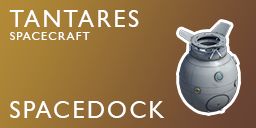
<style>
.page{position:relative;width:256px;height:128px}
.page>*{position:absolute;margin:0}
.t1{font:24px "GillSansMT";letter-spacing:0.1em;color:#ffffff}
.t2{font:12px "GillSansMT";letter-spacing:0.1em;color:#ffffff}
</style>
<div class="page">
<p class="t1" style="left:9px;top:10px;width:130px;height:17px">TANTARES</p>
<p class="t2" style="left:10px;top:32px;width:80px;height:8px">SPACECRAFT</p>
<p class="t1" style="left:10px;top:101px;width:155px;height:17px">SPACEDOCK</p>
</div>
